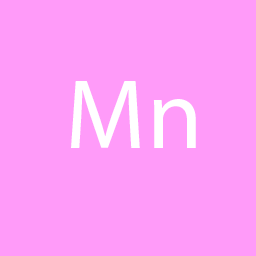
<style>
.page{position:relative;width:256px;height:256px;background:#ff9bf9}
.page>*{position:absolute;margin:0}
.t1{font:100px "MyriadPro-Regular";color:#ffffff}
</style>
<div class="page">
<p class="t1" style="left:71px;top:81px;width:125px;height:67px">Mn</p>
</div>
